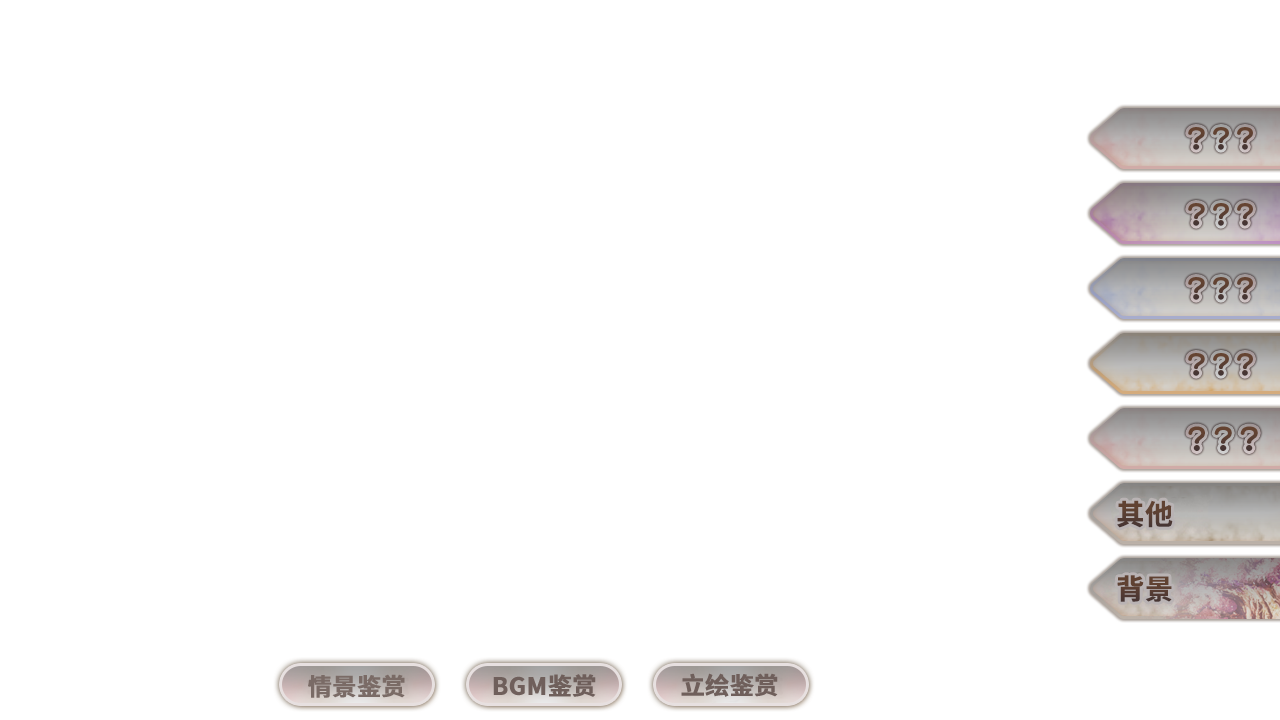
<style>
.page{position:relative;width:1280px;height:720px;background:#ffffff}
.page>*{position:absolute;margin:0}
.t1{font:28px "SourceHanSansSC-Bold";color:#5b3f33;font-weight:bold}
.t2{font:24px "SourceHanSansSC-Bold";color:#7a6b66;font-weight:bold}
.t3{font:24px "SourceHanSansSC-Bold";color:#6f5f5b;font-weight:bold}
</style>
<div class="page">
<p class="t1" style="left:1117px;top:500px;width:56px;height:28px">其他</p>
<p class="t1" style="left:1117px;top:575px;width:55px;height:27px">背景</p>
<p class="t2" style="left:308px;top:674px;width:97px;height:24px">情景鉴赏</p>
<p class="t3" style="left:493px;top:674px;width:103px;height:23px">BGM鉴赏</p>
<p class="t3" style="left:681px;top:673px;width:97px;height:24px">立绘鉴赏</p>
</div>
